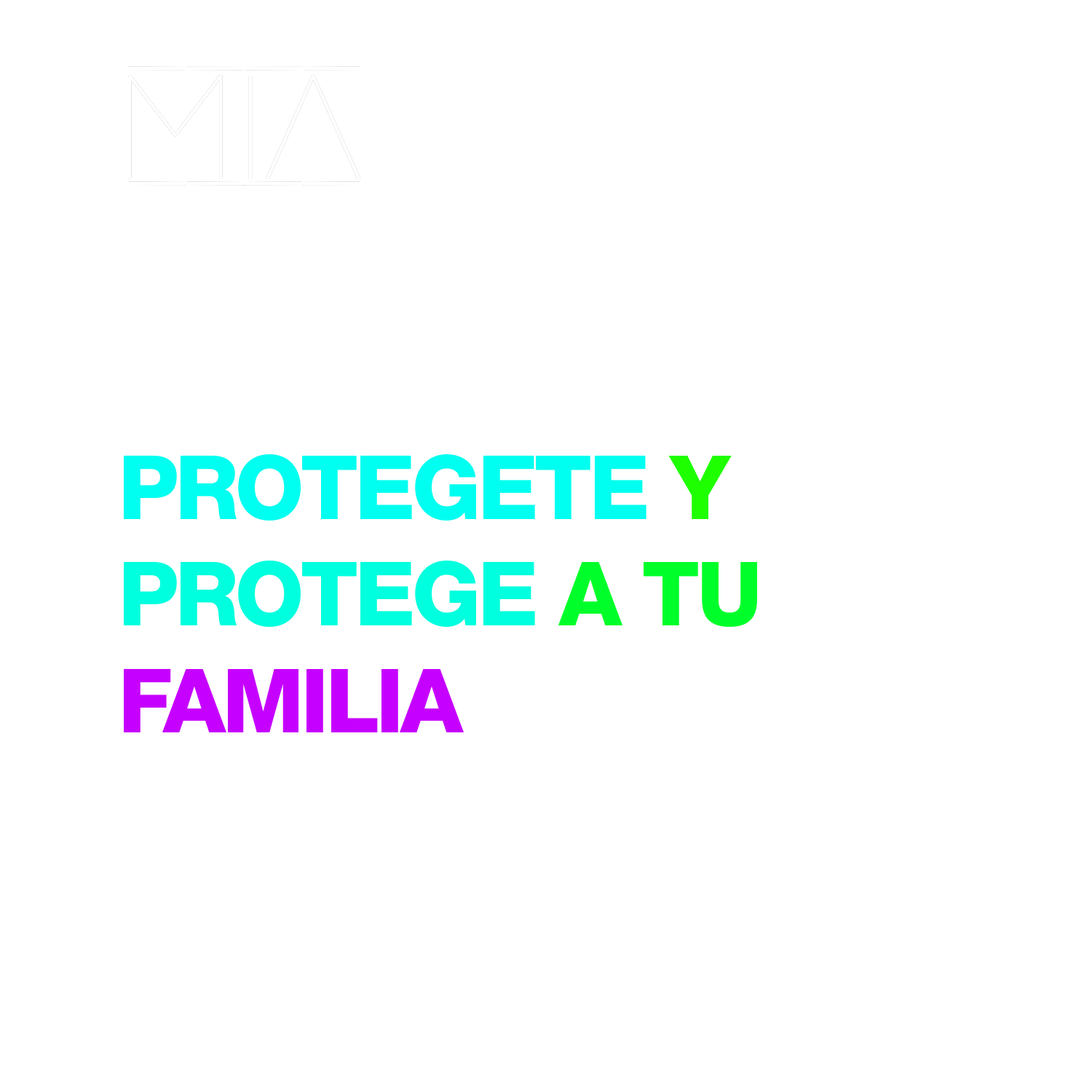
<style>
.page{position:relative;width:1092px;height:1092px;background:#ffffff}
.page>*{position:absolute;margin:0}
.t1{font:88.7px "HelveticaNeueLTStd-Hv";letter-spacing:-0.04em;color:#00fff0}
.t2{font:88.7px "HelveticaNeueLTStd-Hv";letter-spacing:-0.04em;color:#1eff00}
.t3{font:88.7px "HelveticaNeueLTStd-Hv";letter-spacing:-0.04em;color:#00ffde}
.t4{font:88.7px "HelveticaNeueLTStd-Hv";letter-spacing:-0.04em;color:#00ff2a}
.t5{font:88.7px "HelveticaNeueLTStd-Hv";letter-spacing:-0.04em;color:#c600ff}
</style>
<div class="page">
<p class="t1" style="left:124px;top:454px;width:633px;height:278px">PROTEGETE <span class="t2">Y<br></span><span class="t3">PROTEGE</span><span class="t4"> A TU <br></span><span class="t5">FAMILIA</span></p>
</div>
